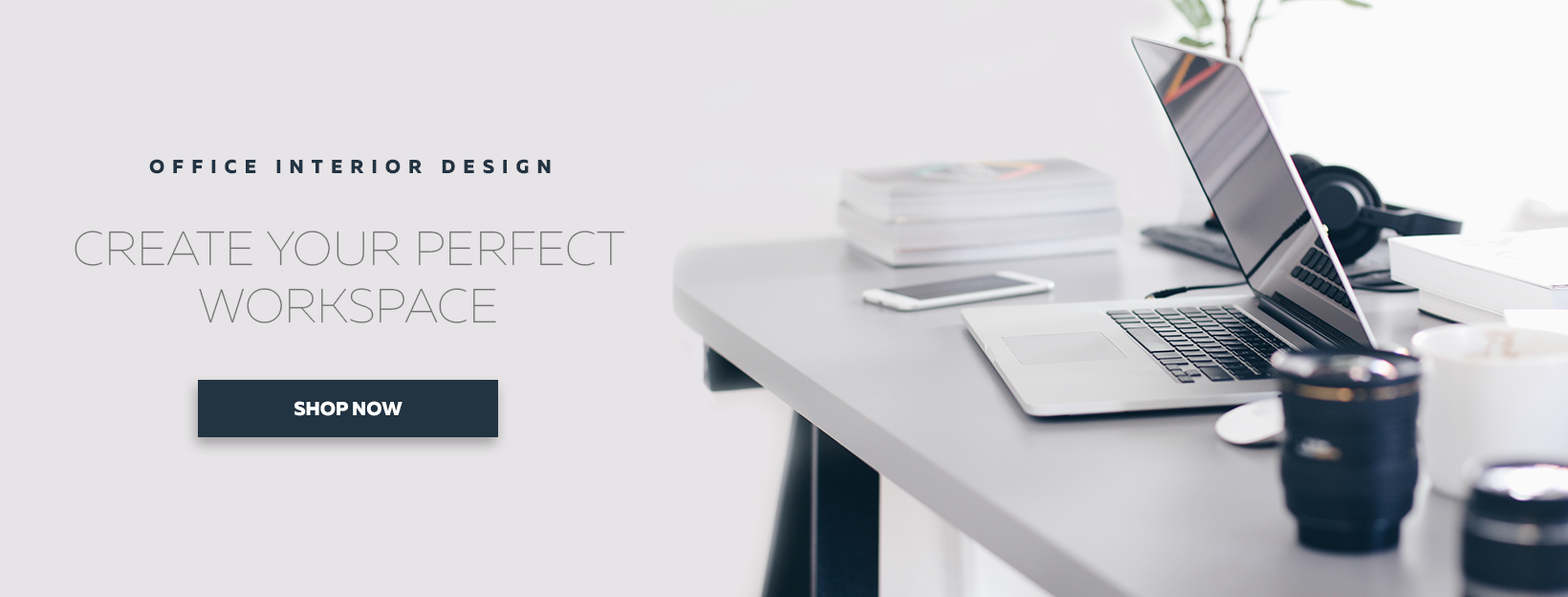
<style>
.page{position:relative;width:1568px;height:597px;background:#e6e4e6}
.page>*{position:absolute;margin:0}
.t1{font:19.1px "MullerExtraBoldDEMO";letter-spacing:0.4em;color:#223342;text-transform:uppercase}
.t2{font:47.8px "MullerThinDEMO";color:#737373;text-transform:uppercase}
.t3{font:19.1px "MullerExtraBoldDEMO";color:#feffff;text-transform:uppercase}
</style>
<div class="page">
<p class="t1" style="left:149px;top:159px;width:402px;height:15px">Office Interior Design</p>
<p class="t2" style="left:75px;top:230px;width:550px;height:93px;text-align:center">Create your perfect<br>workspace</p>
<p class="t3" style="left:294px;top:401px;width:109px;height:15px">SHOP NOW</p>
</div>
